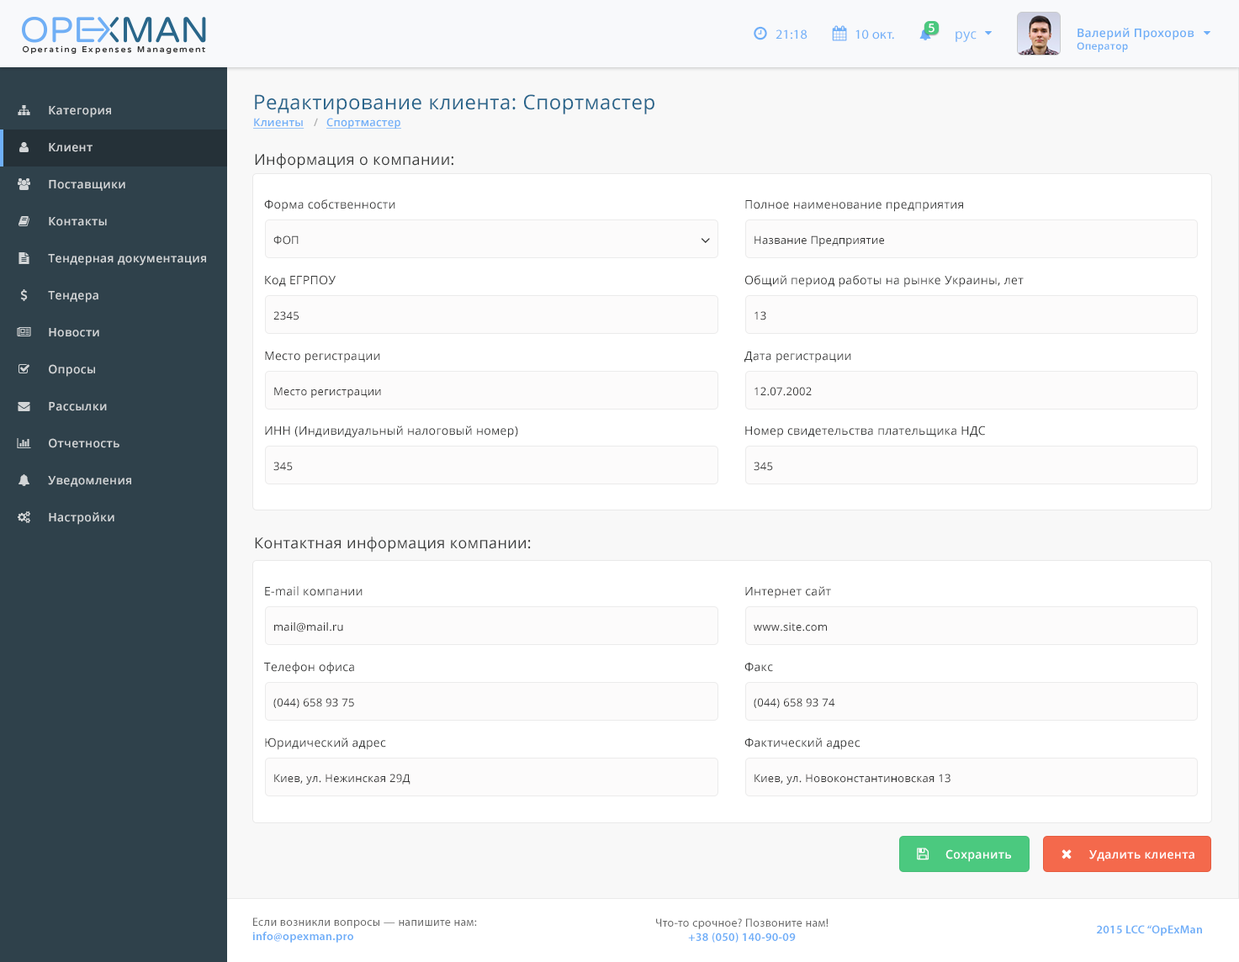
<style>
.page{position:relative;width:1239px;height:962px;background:#ffffff}
.page>*{position:absolute;margin:0}
.t1{font:13.4px "MyriadPro-Regular";letter-spacing:0.025em;color:#6faff8}
.t2{font:11.7px "OpenSans-Semibold";letter-spacing:0.025em;color:#ffffff}
.t3{font:11.7px "OpenSans-Semibold";letter-spacing:0.025em;color:#6eaef7}
.t4{font:10.1px "OpenSans-Semibold";letter-spacing:0.025em;color:#6eaef7}
.t5{font:13.4px "OpenSans";letter-spacing:0.025em;color:#6eaff8}
.t6{font:20.1px "OpenSans";letter-spacing:0.025em;color:#29658b}
.t7{font:11.7px "OpenSans-Semibold";letter-spacing:0.025em;color:#d2d5d7}
.t8{font:10.9px "OpenSans-Semibold";letter-spacing:0.025em;color:#6faff8;text-decoration:underline}
.t9{font:10.9px "OpenSans-Semibold";letter-spacing:0.025em;color:#afafaf}
.t10{font:15.1px "OpenSans";letter-spacing:0.025em;color:#373838}
.t11{font:11.7px "OpenSans";letter-spacing:0.025em;color:#373838}
.t12{font:10.9px "OpenSans";letter-spacing:0.025em;color:#333333}
.t13{font:11.7px "MyriadPro-Regular";letter-spacing:0.025em;color:#696969}
.t14{font:11.7px "MyriadPro-Semibold";letter-spacing:0.025em;color:#6eaef8}
</style>
<div class="page">
<p class="t1" style="left:776px;top:29px;width:32px;height:11px">21:18</p>
<p class="t1" style="left:856px;top:29px;width:38px;height:11px">10 окт.</p>
<p class="t2" style="left:929px;top:24px;width:6px;height:9px">5</p>
<p class="t3" style="left:1077px;top:28px;width:118px;height:24px">Валерий Прохоров<br><span class="t4">Оператор</span></p>
<p class="t5" style="left:956px;top:31px;width:21px;height:11px">рус</p>
<p class="t6" style="left:255px;top:94px;width:399px;height:20px">Редактирование клиента: Спортмастер</p>
<p class="t7" style="left:49px;top:106px;width:62px;height:12px">Категория</p>
<p class="t8" style="left:253px;top:118px;width:52px;height:11px">Клиенты</p>
<p class="t9" style="left:314px;top:118px;width:4px;height:8px">/</p>
<p class="t8" style="left:326px;top:118px;width:75px;height:11px">Спортмастер</p>
<p class="t7" style="left:49px;top:143px;width:44px;height:9px">Клиент</p>
<p class="t10" style="left:255px;top:153px;width:198px;height:16px">Информация о компании:</p>
<p class="t7" style="left:49px;top:180px;width:76px;height:11px">Поставщики</p>
<p class="t11" style="left:264px;top:199px;width:131px;height:13px">Форма собственности</p>
<p class="t11" style="left:745px;top:200px;width:218px;height:12px">Полное наименование предприятия</p>
<p class="t7" style="left:49px;top:217px;width:58px;height:9px">Контакты</p>
<p class="t12" style="left:273px;top:236px;width:26px;height:9px">ФОП</p>
<p class="t12" style="left:755px;top:236px;width:129px;height:10px">Название Предприятие</p>
<p class="t7" style="left:48px;top:254px;width:158px;height:12px">Тендерная документация</p>
<p class="t11" style="left:265px;top:275px;width:71px;height:12px">Код ЕГРПОУ</p>
<p class="t11" style="left:744px;top:275px;width:280px;height:13px">Общий период работы на рынке Украины, лет</p>
<p class="t7" style="left:48px;top:291px;width:50px;height:12px">Тендера</p>
<p class="t12" style="left:273px;top:311px;width:26px;height:9px">2345</p>
<p class="t12" style="left:755px;top:311px;width:11px;height:9px">13</p>
<p class="t7" style="left:49px;top:328px;width:50px;height:9px">Новости</p>
<p class="t11" style="left:265px;top:352px;width:115px;height:11px">Место регистрации</p>
<p class="t11" style="left:744px;top:352px;width:107px;height:11px">Дата регистрации</p>
<p class="t7" style="left:49px;top:364px;width:46px;height:13px">Опросы</p>
<p class="t12" style="left:274px;top:387px;width:107px;height:11px">Место регистрации</p>
<p class="t12" style="left:755px;top:387px;width:57px;height:9px">12.07.2002</p>
<p class="t7" style="left:49px;top:402px;width:58px;height:9px">Рассылки</p>
<p class="t11" style="left:265px;top:426px;width:253px;height:12px">ИНН (Индивидуальный налоговый номер)</p>
<p class="t11" style="left:745px;top:426px;width:240px;height:12px">Номер свидетельства плательщика НДС</p>
<p class="t7" style="left:49px;top:438px;width:70px;height:10px">Отчетность</p>
<p class="t12" style="left:273px;top:462px;width:20px;height:9px">345</p>
<p class="t12" style="left:754px;top:462px;width:19px;height:9px">345</p>
<p class="t7" style="left:48px;top:476px;width:83px;height:11px">Уведомления</p>
<p class="t7" style="left:49px;top:512px;width:65px;height:13px">Настройки</p>
<p class="t10" style="left:255px;top:537px;width:276px;height:16px">Контактная информация компании:</p>
<p class="t11" style="left:265px;top:586px;width:98px;height:10px">E-mail компании</p>
<p class="t11" style="left:745px;top:586px;width:86px;height:13px">Интернет сайт</p>
<p class="t12" style="left:274px;top:622px;width:69px;height:11px">mail@mail.ru</p>
<p class="t12" style="left:754px;top:622px;width:73px;height:10px">www.site.com</p>
<p class="t11" style="left:264px;top:662px;width:90px;height:13px">Телефон офиса</p>
<p class="t11" style="left:744px;top:662px;width:29px;height:10px">Факс</p>
<p class="t12" style="left:273px;top:698px;width:81px;height:10px">(044) 658 93 75</p>
<p class="t12" style="left:754px;top:698px;width:81px;height:10px">(044) 658 93 74</p>
<p class="t11" style="left:265px;top:738px;width:121px;height:12px">Юридический адрес</p>
<p class="t11" style="left:744px;top:738px;width:116px;height:12px">Фактический адрес</p>
<p class="t12" style="left:274px;top:774px;width:137px;height:11px">Киев, ул. Нежинская 29Д</p>
<p class="t12" style="left:755px;top:774px;width:196px;height:11px">Киев, ул. Новоконстантиновская 13</p>
<p class="t2" style="left:946px;top:850px;width:65px;height:12px">Сохранить</p>
<p class="t2" style="left:1089px;top:850px;width:106px;height:11px">Удалить клиента</p>
<p class="t13" style="left:252px;top:918px;width:225px;height:25px">Если возникли вопросы — напишите нам:<br><span class="t14">info@opexman.pro</span></p>
<p class="t13" style="left:656px;top:919px;width:173px;height:24px;text-align:center">Что-то срочное? Позвоните нам!<br><span class="t14">+38 (050) 140-90-09</span></p>
<p class="t14" style="left:1097px;top:925px;width:105px;height:11px">2015 LCC “OpExMan</p>
</div>
